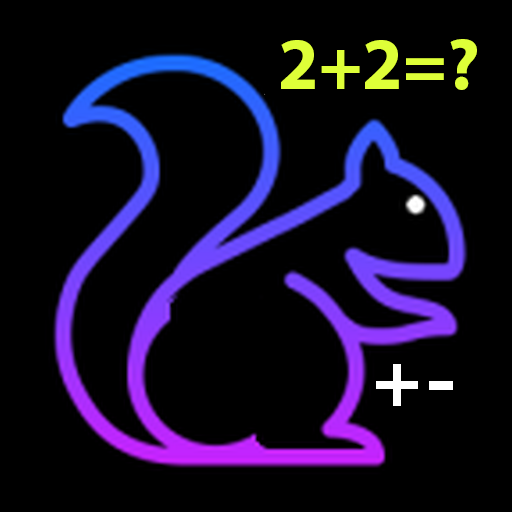
<style>
.page{position:relative;width:512px;height:512px;background:#000000}
.page>*{position:absolute;margin:0}
.t1{font:73.3px "MyriadPro-Bold";color:#deff38}
</style>
<div class="page">
<p class="t1" style="left:281px;top:39px;width:196px;height:51px">2+2=?</p>
</div>
